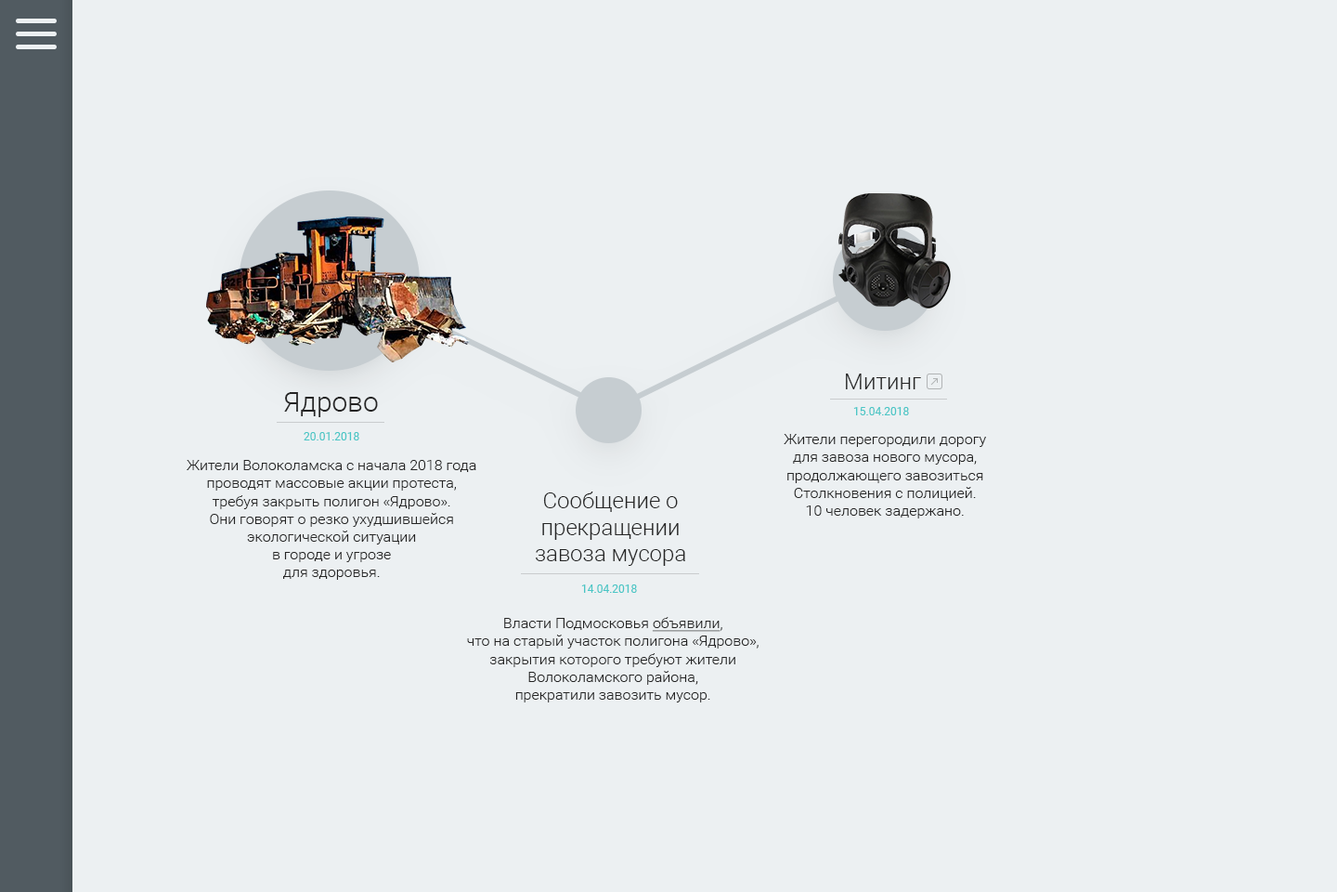
<style>
.page{position:relative;width:1337px;height:892px;background:#ecf0f2}
.page>*{position:absolute;margin:0}
.t1{font:22.3px "Roboto-Light";color:#252525}
.t2{font:27.9px "Roboto-Light";color:#252525}
.t3{font:11.1px "Roboto-Regular";color:#4ac6c6}
.t4{font:14.9px "Roboto-Light";color:#252525}
.t5{font:14.9px "Roboto-Light";color:#252525;text-decoration:underline}
</style>
<div class="page">
<p class="t1" style="left:846px;top:373px;width:75px;height:16px">Митинг</p>
<p class="t2" style="left:284px;top:392px;width:94px;height:25px">Ядрово</p>
<p class="t3" style="left:854px;top:407px;width:55px;height:8px">15.04.2018</p>
<p class="t3" style="left:304px;top:432px;width:55px;height:8px">20.01.2018</p>
<p class="t4" style="left:784px;top:434px;width:202px;height:84px;text-align:center">Жители перегородили дорогу<br>для завоза нового мусора,<br>продолжающего завозиться<br>Столкновения с полицией.<br>10 человек задержано.</p>
<p class="t4" style="left:187px;top:460px;width:289px;height:120px;text-align:center">Жители Волоколамска с начала 2018 года<br>проводят массовые акции протеста,<br>требуя закрыть полигон «Ядрово».<br>Они говорят о резко ухудшившейся<br>экологической ситуации<br>в городе и угрозе<br>для здоровья.</p>
<p class="t1" style="left:536px;top:491px;width:149px;height:75px;text-align:center">Сообщение о<br>прекращении<br>завоза мусора</p>
<p class="t3" style="left:581px;top:584px;width:56px;height:9px">14.04.2018</p>
<p class="t4" style="left:467px;top:617px;width:292px;height:85px;text-align:center">Власти Подмосковья <span class="t5">объявили</span>,<br>что на старый участок полигона «Ядрово»,<br>закрытия которого требуют жители<br>Волоколамского района,<br>прекратили завозить мусор.</p>
</div>
